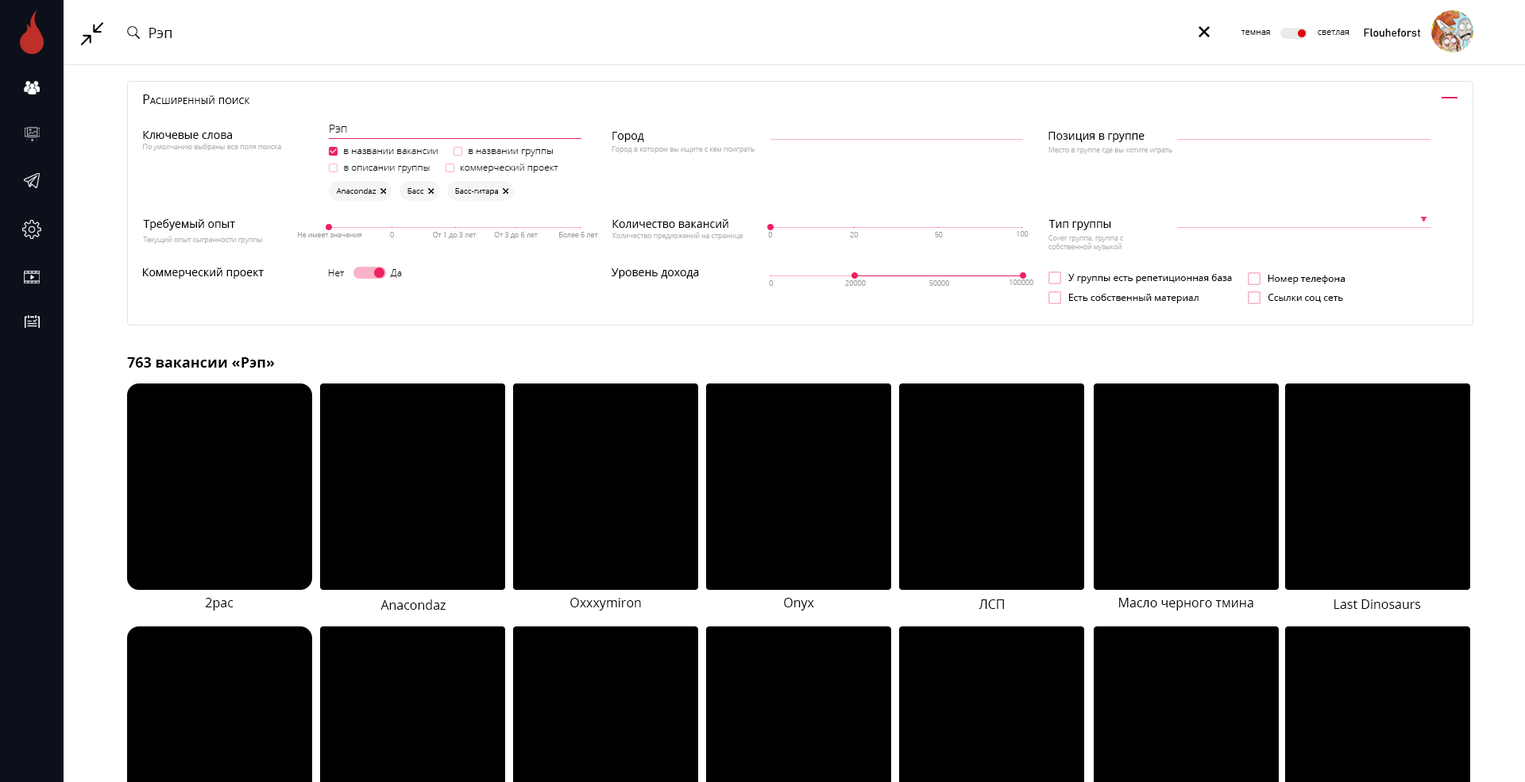
<style>
.page{position:relative;width:1525px;height:782px;background:#ffffff}
.page>*{position:absolute;margin:0}
.t1{font:14.3px "OpenSans";color:#000000}
.t2{font:11.1px "Bahnschrift";color:#000000}
.t3{font:8.7px "OpenSans-Light";color:#000000}
.t4{font:12.7px "OpenSans";color:#000000;font-variant:small-caps}
.t5{font:11.1px "OpenSans-Light";color:#000000}
.t6{font:11.1px "OpenSans";color:#000000}
.t7{font:7.1px "OpenSans-Light";color:#afafb7}
.t8{font:9.5px "OpenSans-Light";color:#000000}
.t9{font:7.9px "OpenSans-Light";color:#000000}
.t10{font:7.1px "OpenSans-Light";color:#9a9a9a}
.t11{font:9.5px "OpenSans";color:#000000}
.t12{font:14.3px "OpenSans-Bold";color:#000000}
.t13{font:12.7px "OpenSans";color:#000000}
</style>
<div class="page">
<p class="t1" style="left:149px;top:28px;width:23px;height:10px">Рэп</p>
<p class="t2" style="left:1363px;top:28px;width:58px;height:9px">Flouheforst</p>
<p class="t3" style="left:1240px;top:30px;width:30px;height:5px">темная</p>
<p class="t3" style="left:1317px;top:30px;width:31px;height:5px">светлая</p>
<p class="t4" style="left:143px;top:94px;width:107px;height:10px">Расширенный поиск</p>
<p class="t5" style="left:330px;top:125px;width:17px;height:8px">Рэп</p>
<p class="t6" style="left:143px;top:131px;width:89px;height:8px">Ключевые слова</p>
<p class="t6" style="left:612px;top:132px;width:32px;height:10px">Город</p>
<p class="t6" style="left:1048px;top:132px;width:96px;height:10px">Позиция в группе</p>
<p class="t7" style="left:143px;top:144px;width:138px;height:7px">По умолчанию выбраны все поля поиска</p>
<p class="t8" style="left:344px;top:149px;width:94px;height:5px">в названии вакансии</p>
<p class="t8" style="left:468px;top:149px;width:85px;height:7px">в названии группы</p>
<p class="t7" style="left:612px;top:146px;width:142px;height:7px">Город в котором вы ищите с кем поиграть</p>
<p class="t7" style="left:1048px;top:147px;width:124px;height:7px">Место в группе где вы хотите играть</p>
<p class="t8" style="left:344px;top:166px;width:86px;height:7px">в описании группы</p>
<p class="t8" style="left:461px;top:164px;width:97px;height:9px">коммерческий проект</p>
<p class="t9" style="left:336px;top:188px;width:40px;height:6px">Anacondaz</p>
<p class="t9" style="left:407px;top:188px;width:17px;height:6px">Басс</p>
<p class="t9" style="left:455px;top:188px;width:43px;height:7px">Басс-гитара</p>
<p class="t6" style="left:143px;top:219px;width:92px;height:11px">Требуемый опыт</p>
<p class="t6" style="left:612px;top:219px;width:116px;height:9px">Количество вакансий</p>
<p class="t6" style="left:1048px;top:220px;width:63px;height:10px">Тип группы</p>
<p class="t10" style="left:298px;top:232px;width:64px;height:5px">Не имеет значения</p>
<p class="t10" style="left:390px;top:232px;width:4px;height:5px">0</p>
<p class="t10" style="left:433px;top:232px;width:43px;height:7px">От 1 до 3 лет</p>
<p class="t10" style="left:494px;top:232px;width:44px;height:7px">От 3 до 6 лет</p>
<p class="t10" style="left:559px;top:232px;width:39px;height:5px">Более 6 лет</p>
<p class="t7" style="left:612px;top:232px;width:131px;height:8px">Количество предложений на странице</p>
<p class="t10" style="left:768px;top:232px;width:4px;height:5px">0</p>
<p class="t10" style="left:850px;top:232px;width:8px;height:5px">20</p>
<p class="t10" style="left:935px;top:232px;width:8px;height:5px">50</p>
<p class="t10" style="left:1016px;top:231px;width:12px;height:6px">100</p>
<p class="t7" style="left:143px;top:236px;width:119px;height:8px">Текущий опыт сыгранности группы</p>
<p class="t7" style="left:1048px;top:235px;width:75px;height:16px">Cover группа, группа с<br>собственной музыкой</p>
<p class="t6" style="left:143px;top:268px;width:121px;height:11px">Коммерческий проект</p>
<p class="t8" style="left:328px;top:269px;width:17px;height:7px">Нет</p>
<p class="t8" style="left:390px;top:269px;width:12px;height:9px">Да</p>
<p class="t6" style="left:611px;top:268px;width:88px;height:11px">Уровень дохода</p>
<p class="t10" style="left:769px;top:280px;width:4px;height:6px">0</p>
<p class="t10" style="left:845px;top:280px;width:21px;height:6px">20000</p>
<p class="t10" style="left:929px;top:280px;width:20px;height:6px">50000</p>
<p class="t10" style="left:1009px;top:280px;width:24px;height:5px">100000</p>
<p class="t11" style="left:1068px;top:274px;width:164px;height:9px">У группы есть репетиционная база</p>
<p class="t11" style="left:1267px;top:275px;width:77px;height:9px">Номер телефона</p>
<p class="t11" style="left:1069px;top:294px;width:129px;height:9px">Есть собственный материал</p>
<p class="t11" style="left:1267px;top:294px;width:76px;height:9px">Ссылки соц сеть</p>
<p class="t12" style="left:127px;top:357px;width:148px;height:11px">763 вакансии «Рэп»</p>
<p class="t13" style="left:205px;top:598px;width:28px;height:13px">2pac</p>
<p class="t13" style="left:380px;top:600px;width:65px;height:10px">Anacondaz</p>
<p class="t13" style="left:570px;top:598px;width:71px;height:13px">Oxxxymiron</p>
<p class="t13" style="left:784px;top:598px;width:30px;height:13px">Onyx</p>
<p class="t13" style="left:978px;top:600px;width:26px;height:9px">ЛСП</p>
<p class="t13" style="left:1119px;top:598px;width:134px;height:13px">Масло черного тмина</p>
<p class="t13" style="left:1334px;top:600px;width:87px;height:9px">Last Dinosaurs</p>
</div>
